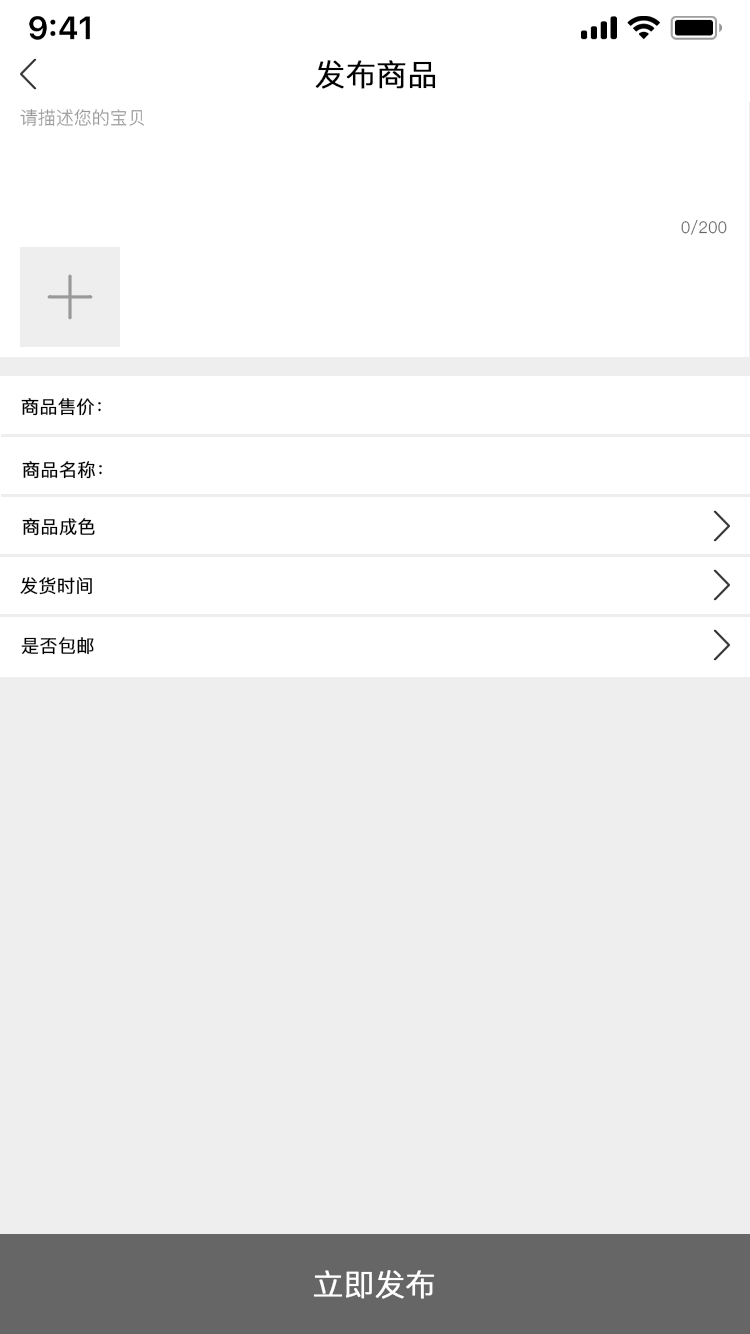
<style>
.page{position:relative;width:750px;height:1334px;background:#eeeeee}
.page>*{position:absolute;margin:0}
.t1{font:30px "PingFang-SC-Regular";color:#000000;font-weight:bold}
.t2{font:18px "PingFang-SC-Regular";color:#999999}
.t3{font:16px "PingFang-SC-Regular";color:#666666}
.t4{font:18px "PingFang-SC-Regular";color:#000000;font-weight:bold}
.t5{font:30px "PingFang-SC-Regular";color:#ffffff;font-weight:bold}
</style>
<div class="page">
<p class="t1" style="left:315px;top:60px;width:121px;height:29px">发布商品</p>
<p class="t2" style="left:20px;top:109px;width:124px;height:17px">请描述您的宝贝</p>
<p class="t3" style="left:681px;top:219px;width:46px;height:16px">0/200</p>
<p class="t4" style="left:21px;top:398px;width:80px;height:18px">商品售价：</p>
<p class="t4" style="left:22px;top:461px;width:80px;height:18px">商品名称：</p>
<p class="t4" style="left:22px;top:518px;width:73px;height:18px">商品成色</p>
<p class="t4" style="left:20px;top:577px;width:72px;height:18px">发货时间</p>
<p class="t4" style="left:21px;top:637px;width:73px;height:18px">是否包邮</p>
<p class="t5" style="left:313px;top:1270px;width:122px;height:29px">立即发布</p>
</div>
